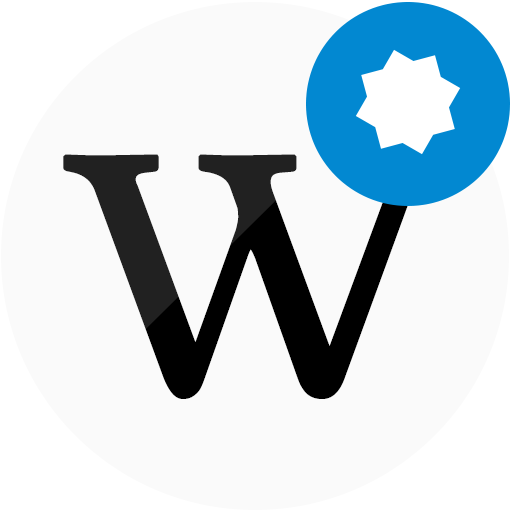
<style>
.page{position:relative;width:512px;height:512px;background:#fafafa}
.page>*{position:absolute;margin:0}
.t1{font:508.3px "LinLibertineC";letter-spacing:-0.04em;font-weight:bold}
</style>
<div class="page">
<p class="t1" style="left:63px;top:154px;width:385px;height:245px">w</p>
</div>
